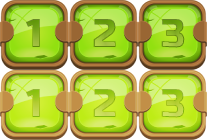
<style>
.page{position:relative;width:207px;height:140px}
.page>*{position:absolute;margin:0}
.t1{font:40px "RussoOne-Regular"}
</style>
<div class="page">
<p class="t1" style="left:26px;top:19px;width:14px;height:28px">1</p>
<p class="t1" style="left:93px;top:19px;width:23px;height:28px">2</p>
<p class="t1" style="left:161px;top:19px;width:24px;height:29px">3</p>
<p class="t1" style="left:26px;top:89px;width:14px;height:28px">1</p>
<p class="t1" style="left:93px;top:89px;width:23px;height:28px">2</p>
<p class="t1" style="left:161px;top:89px;width:24px;height:29px">3</p>
</div>
